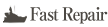
<style>
.page{position:relative;width:108px;height:27px;background:#ffffff}
.page>*{position:absolute;margin:0}
.t1{font:18px "RyuminPro-ExBold";letter-spacing:-0.08em;color:#4c4843;scale:0.9 1}
</style>
<div class="page">
<p class="t1" style="left:30px;top:7px;width:78px;height:17px">Fast Repair</p>
</div>
